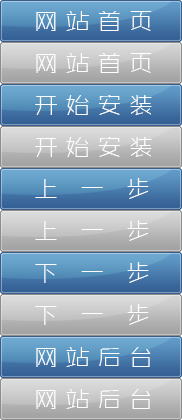
<style>
.page{position:relative;width:182px;height:420px}
.page>*{position:absolute;margin:0}
.t1{font:24px "ZHSRXT--GBK1-0";letter-spacing:0.32em;color:#ffffff}
</style>
<div class="page">
<p class="t1" style="left:36px;top:11px;width:116px;height:20px">网站首页</p>
<p class="t1" style="left:36px;top:53px;width:116px;height:20px">网站首页</p>
<p class="t1" style="left:35px;top:95px;width:117px;height:20px">开始安装</p>
<p class="t1" style="left:35px;top:137px;width:117px;height:20px">开始安装</p>
<p class="t1" style="left:35px;top:178px;width:114px;height:21px">上 一 步</p>
<p class="t1" style="left:35px;top:220px;width:114px;height:21px">上 一 步</p>
<p class="t1" style="left:35px;top:262px;width:114px;height:21px">下 一 步</p>
<p class="t1" style="left:35px;top:304px;width:114px;height:21px">下 一 步</p>
<p class="t1" style="left:36px;top:347px;width:115px;height:20px">网站后台</p>
<p class="t1" style="left:36px;top:389px;width:115px;height:20px">网站后台</p>
</div>
